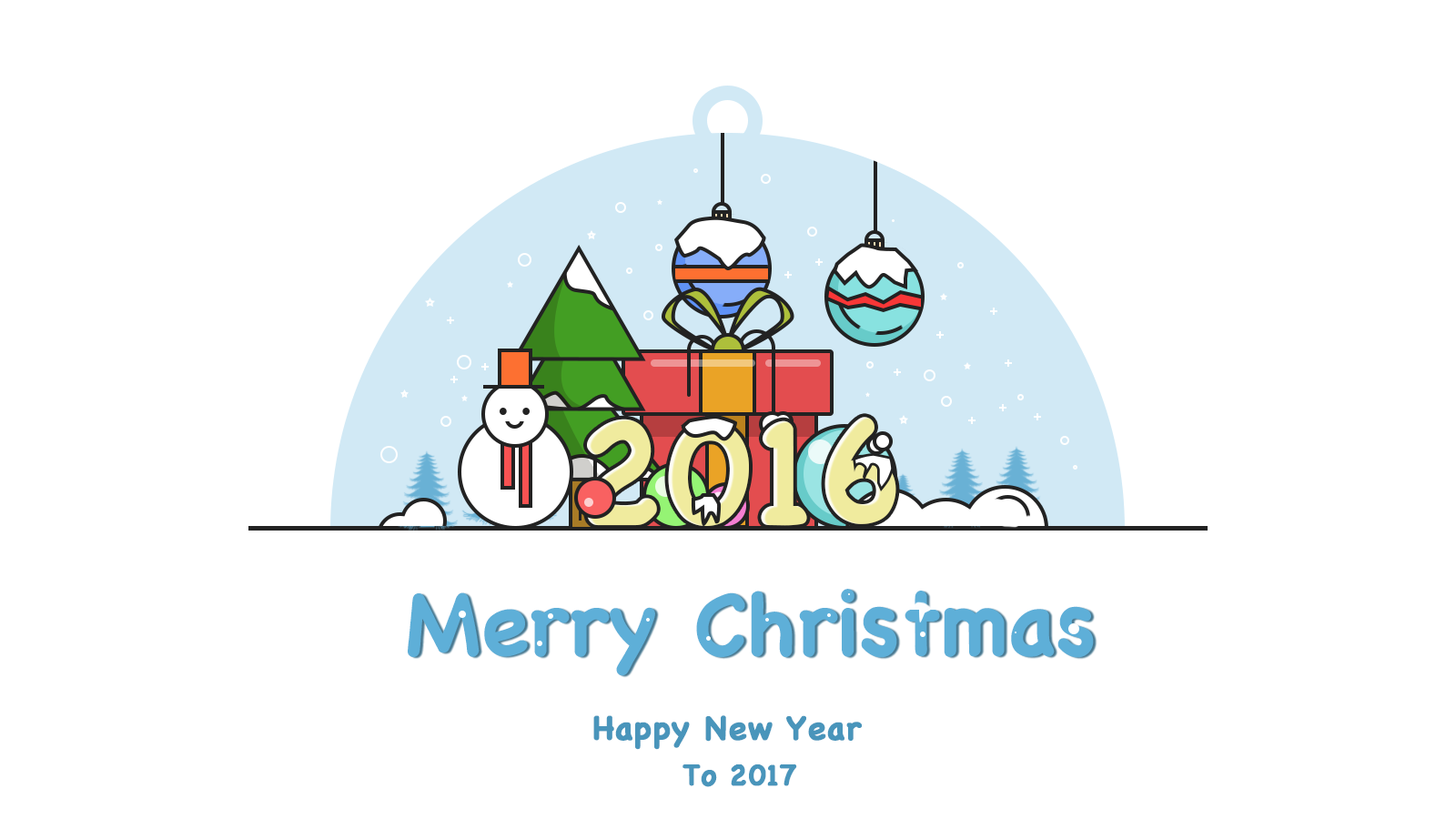
<style>
.page{position:relative;width:1456px;height:819px;background:#ffffff}
.page>*{position:absolute;margin:0}
.t1{font:145.6px "Chalkboard-Bold";color:#f0eb9e}
.t2{font:87.4px "Chalkboard-Bold";color:#5eafd8}
.t3{font:32.8px "Chalkboard-Bold";color:#4995bb;font-weight:bold}
.t4{font:29.1px "Chalkboard-Bold";color:#4995bb;font-weight:bold}
</style>
<div class="page">
<p class="t1" style="left:587px;top:417px;width:309px;height:109px">2016</p>
<p class="t2" style="left:408px;top:589px;width:686px;height:87px">Merry Christmas</p>
<p class="t3" style="left:593px;top:715px;width:269px;height:35px">Happy New Year</p>
<p class="t4" style="left:682px;top:764px;width:115px;height:23px">To 2017</p>
</div>
